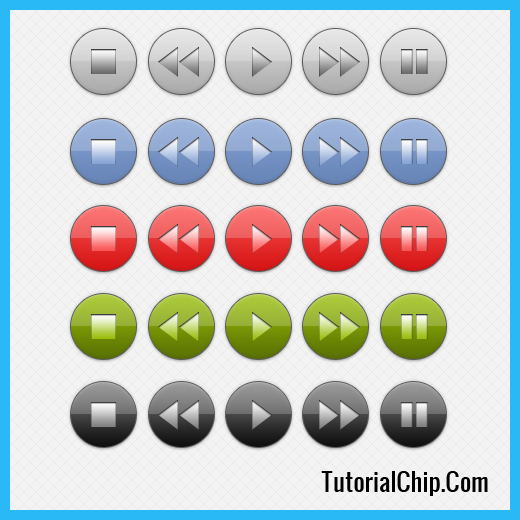
<style>
.page{position:relative;width:520px;height:520px;background:#f3f3f3}
.page>*{position:absolute;margin:0}
.t1{font:24px "Oswald";color:#000000}
</style>
<div class="page">
<p class="t1" style="left:321px;top:471px;width:167px;height:25px">TutorialChip.Com</p>
</div>
